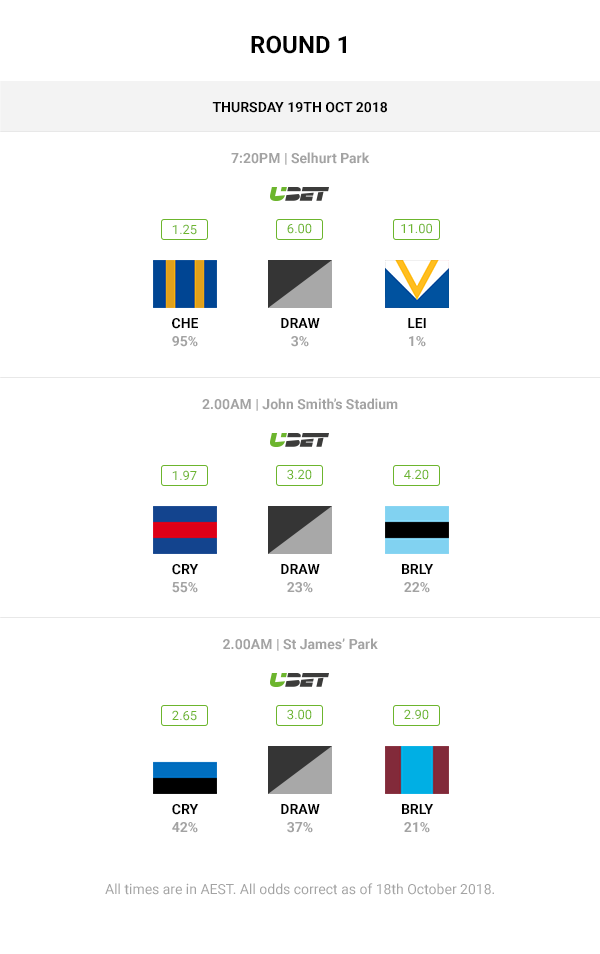
<style>
.page{position:relative;width:600px;height:954px;background:#ffffff}
.page>*{position:absolute;margin:0}
.t1{font:24px "Roboto-Bold";color:#000000}
.t2{font:14px "Roboto-Bold";color:#000000}
.t3{font:14px "Roboto-Bold";color:#a3a3a3}
.t4{font:12.8px "Roboto-Regular";color:#6cb52d}
.t5{font:12.7px "Roboto-Regular";color:#6cb52d}
.t6{font:14px/18px "Roboto-Bold";color:#000000}
.t7{font:14px/18px "Roboto-Bold";color:#a3a3a3}
.t8{font:14px "Roboto-Regular";color:#a3a3a3}
</style>
<div class="page">
<p class="t1" style="left:251px;top:35px;width:95px;height:19px">ROUND 1</p>
<p class="t2" style="left:212px;top:102px;width:175px;height:11px">THURSDAY 19TH OCT 2018</p>
<p class="t3" style="left:231px;top:152px;width:139px;height:13px">7:20PM | Selhurt Park</p>
<p class="t4" style="left:172px;top:224px;width:25px;height:11px">1.25</p>
<p class="t5" style="left:287px;top:223px;width:25px;height:11px">6.00</p>
<p class="t5" style="left:401px;top:223px;width:31px;height:11px">11.00</p>
<p class="t6" style="left:172px;top:318px;width:26px;height:29px;text-align:center">CHE<br><span class="t7">95%</span></p>
<p class="t6" style="left:281px;top:318px;width:39px;height:29px;text-align:center">DRAW<br><span class="t7">3%</span></p>
<p class="t6" style="left:408px;top:318px;width:18px;height:29px;text-align:center">LEI<br><span class="t7">1%</span></p>
<p class="t3" style="left:202px;top:398px;width:196px;height:13px">2.00AM | John Smith’s Stadium</p>
<p class="t4" style="left:172px;top:470px;width:25px;height:10px">1.97</p>
<p class="t5" style="left:287px;top:469px;width:25px;height:11px">3.20</p>
<p class="t5" style="left:404px;top:469px;width:25px;height:11px">4.20</p>
<p class="t6" style="left:172px;top:564px;width:27px;height:29px;text-align:center">CRY<br><span class="t7">55%</span></p>
<p class="t6" style="left:281px;top:564px;width:39px;height:29px;text-align:center">DRAW<br><span class="t7">23%</span></p>
<p class="t6" style="left:402px;top:564px;width:32px;height:29px;text-align:center">BRLY<br><span class="t7">22%</span></p>
<p class="t3" style="left:223px;top:638px;width:155px;height:13px">2.00AM | St James’ Park</p>
<p class="t4" style="left:172px;top:710px;width:25px;height:11px">2.65</p>
<p class="t5" style="left:287px;top:709px;width:25px;height:11px">3.00</p>
<p class="t5" style="left:404px;top:709px;width:25px;height:11px">2.90</p>
<p class="t6" style="left:172px;top:804px;width:27px;height:29px;text-align:center">CRY<br><span class="t7">42%</span></p>
<p class="t6" style="left:281px;top:804px;width:39px;height:29px;text-align:center">DRAW<br><span class="t7">37%</span></p>
<p class="t6" style="left:402px;top:804px;width:32px;height:29px;text-align:center">BRLY<br><span class="t7">21%</span></p>
<p class="t8" style="left:105px;top:883px;width:389px;height:12px">All times are in AEST. All odds correct as of 18th October 2018.</p>
</div>
